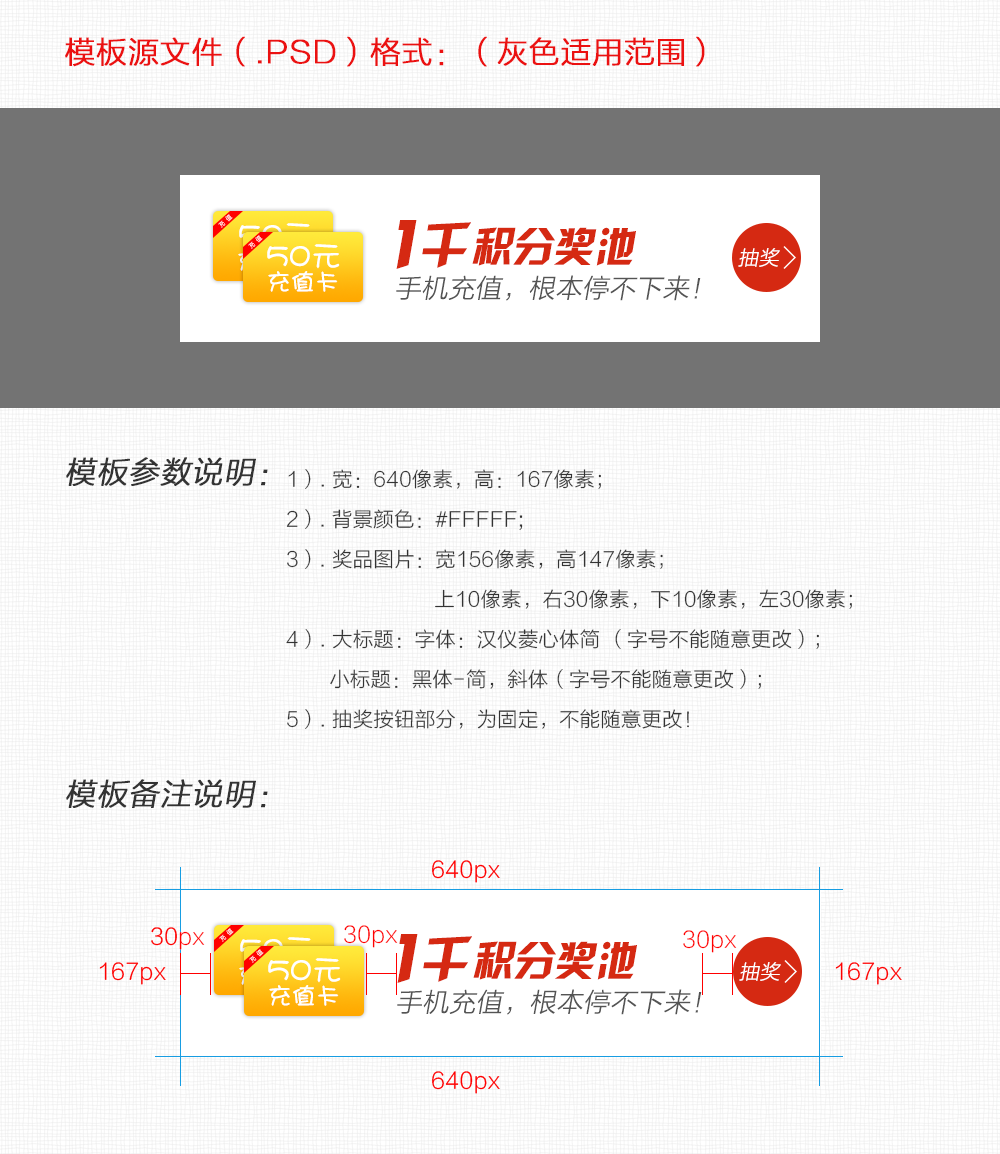
<style>
.page{position:relative;width:1000px;height:1154px;background:#ffffff}
.page>*{position:absolute;margin:0}
.t1{font:30px "STHeitiSC-Light";color:#eb1111;font-weight:bold}
.t2{font:40.6px "HYk2gj";color:#d52912;font-style:italic}
.t3{font:71.7px "HYk2gj";letter-spacing:0.1em;color:#d52912;font-style:italic}
.t4{font:47.8px "HYk2gj";letter-spacing:0.1em;color:#d52912;font-style:italic}
.t5{font:20px "STHeitiSC-Light";color:#ffffff;font-style:italic}
.t6{font:26px "STHeitiSC-Light";color:#545454;font-style:italic}
.t7{font:30px "STHeitiSC-Light";color:#333333;font-weight:bold;font-style:italic}
.t8{font:20px/40px "STHeitiSC-Light";color:#333333}
</style>
<div class="page">
<p class="t1" style="left:65px;top:36px;width:640px;height:31px">模板源文件（.PSD）格式：（灰色适用范围）</p>
<p class="t2" style="left:396px;top:220px;width:240px;height:49px"><span class="t3">1</span><span class="t4">千</span>积分奖池</p>
<p class="t5" style="left:738px;top:248px;width:42px;height:19px">抽奖</p>
<p class="t6" style="left:396px;top:275px;width:305px;height:26px">手机充值，根本停不下来！</p>
<p class="t7" style="left:66px;top:457px;width:202px;height:29px">模板参数说明：</p>
<p class="t8" style="left:286px;top:469px;width:566px;height:260px">1）. 宽：640像素，高：167像素；<br>2）. 背景颜色：#FFFFF;<br>3）. 奖品图片：宽156像素，高147像素；<br>                        上10像素，右30像素，下10像素，左30像素；<br>4）. 大标题：字体：汉仪菱心体简 （字号不能随意更改）；<br>       小标题：黑体-简，斜体（字号不能随意更改）；<br>5）. 抽奖按钮部分，为固定，不能随意更改！</p>
<p class="t7" style="left:66px;top:779px;width:202px;height:29px">模板备注说明：</p>
</div>
